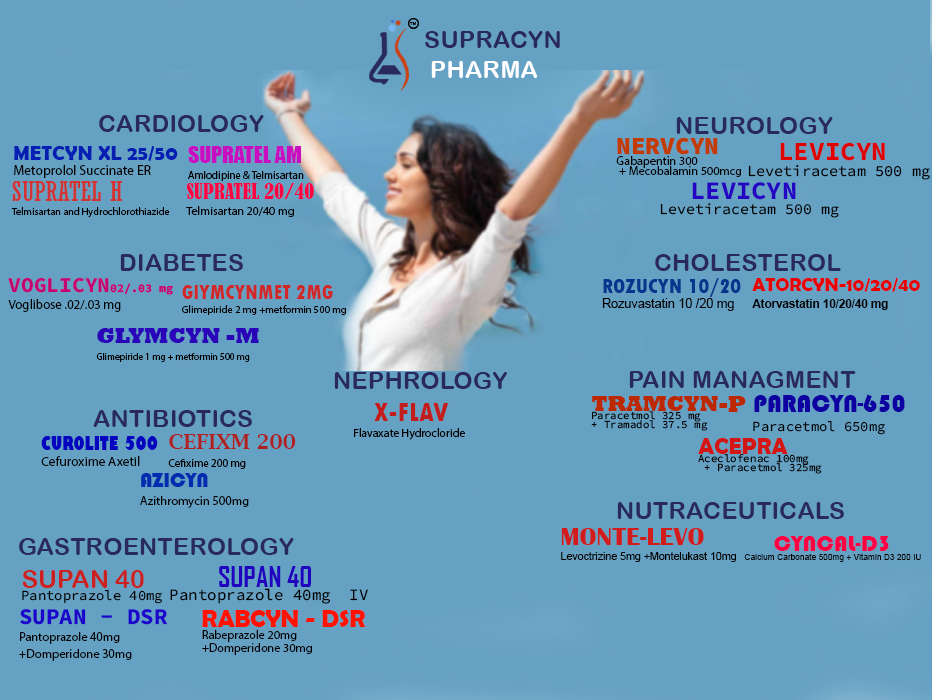
<style>
.page{position:relative;width:932px;height:700px;background:#65a1c3}
.page>*{position:absolute;margin:0}
.t1{font:4.4px "ArialRoundedMTBold";color:#000000;text-transform:uppercase}
.t2{font:24.5px "ArialRoundedMTBold";color:#29295f;text-transform:uppercase}
.t3{font:12.2px/10.5px "MyriadPro-Regular";color:#000000}
.t4{font:24.5px/14.8px "SourceCodeRoman-Black";color:#c23b00}
.t5{font:13.6px/15.2px "MyriadPro-Regular";color:#000000}
.t6{font:20.5px/15.2px "BerlinSansFBDemi-Bold";color:#061eb1}
.t7{font:10.8px/16.1px "MyriadPro-Regular";color:#000000}
.t8{font:21.8px/16.1px "Impact";color:#c90ec2}
.t9{font:15.3px/15.7px "SourceCodeVariable-Roman";color:#000000}
.t10{font:26px/15.7px "SourceCodeRoman-Bold";color:#e00000}
.t11{font:10.3px/13.8px "MyriadPro-Regular";color:#000000}
.t12{font:26.9px/13.8px "Rockwell-Condensed";color:#d23434}
.t13{font:11.9px/15.8px "MyriadPro-Regular";color:#000000}
.t14{font:20.3px/15.8px "BernardMT-Condensed";color:#ff0042}
.t15{font:15px/15.4px "SourceCodeVariable-Roman";color:#000000}
.t16{font:25.4px/15.4px "SourceCodeRoman-Bold";color:#2605c2}
.t17{font:12.9px/16.7px "MyriadPro-Regular";color:#000000}
.t18{font:21.2px/15.7px "SourceCodeRoman-Bold";color:#c70171}
.t19{font:21.2px/11.7px "SourceCodeRoman-Bold";color:#c70171}
.t20{font:11.7px/16.7px "SourceCodeRoman-Bold";color:#c70171}
.t21{font:12.6px/15.3px "ArialMT";color:#000000}
.t22{font:21.9px/15.3px "TwCenMT-CondensedExtraBold";color:#04368e}
.t23{font:11.5px/16.7px "Arial-BoldMT";color:#000000}
.t24{font:18.8px/16.7px "BerlinSansFBDemi-Bold";color:#ea0000}
.t25{font:10.4px/13.9px "MyriadPro-Regular";color:#000000}
.t26{font:20.9px/13.9px "TwCenMT-CondensedExtraBold";color:#d02828}
.t27{font:9.6px/16.1px "MyriadPro-Regular";color:#000000}
.t28{font:21.8px/16.1px "Rockwell-ExtraBold";color:#2a04b8}
.t29{font:10.8px/8.5px "SourceCodeVariable-Roman";color:#000000}
.t30{font:21.7px/15.1px "Rockwell-ExtraBold";color:#bc2800}
.t31{font:13.8px/18.5px "SourceCodeVariable-Roman";color:#000000}
.t32{font:25px/18.5px "Bauhaus93";color:#0f00a1}
.t33{font:11.7px/15.7px "MyriadPro-Regular";color:#000000}
.t34{font:28.4px/15.7px "TwCenMT-CondensedExtraBold";color:#c21c1c}
.t35{font:13.4px/16.1px "MyriadPro-Regular";color:#000000}
.t36{font:19px/16.1px "GillSans-UltraBoldCondensed";color:#0505bf}
.t37{font:11.1px/18px "MyriadPro-Regular";color:#000000}
.t38{font:21.1px/18px "LucidaBright-Demi";color:#af2020}
.t39{font:23.1px/15.4px "BerlinSansFBDemi-Bold";color:#d31515}
.t40{font:12.5px/18.5px "MyriadPro-Regular";color:#000000}
.t41{font:20.9px/18.3px "Bauhaus93";color:#002daf}
.t42{font:10.6px/15.8px "ArialMT";color:#000000}
.t43{font:26.1px/15.8px "BritannicBold";color:#d21c1c}
.t44{font:8.4px/9.7px "ArialMT";color:#000000}
.t45{font:23.3px/9.7px "Bauhaus93";color:#c3641d}
.t46{font:23.3px/9.7px "Bauhaus93";color:#ff0042}
.t47{font:15.8px/12.9px "SourceCodeVariable-Roman";color:#000000}
.t48{font:27.4px/19.2px "AgencyFB-Reg";color:#75cceb}
.t49{font:27.4px/19.2px "AgencyFB-Bold";color:#2102be}
.t50{font:13.9px/12.7px "SourceCodeVariable-Roman";color:#000000}
.t51{font:25.1px/12.7px "ArialRoundedMTBold";color:#cb2121}
.t52{font:12.4px/16.7px "MyriadPro-Regular";color:#000000}
.t53{font:22.5px/16.7px "SourceCodeRoman-Bold";color:#1d06cb}
.t54{font:12.2px/12.4px "MyriadPro-Regular";color:#000000}
.t55{font:24.6px/12.4px "BerlinSansFBDemi-Bold";color:#ff1200}
</style>
<div class="page">
<p class="t1" style="left:409px;top:22px;width:7px;height:3px">TM</p>
<p class="t2" style="left:99px;top:115px;width:165px;height:17px">cardiology</p>
<p class="t2" style="left:676px;top:117px;width:157px;height:17px">neurology</p>
<p class="t3" style="left:616px;top:137px;width:125px;height:40px"><span class="t4">NERVCYN<br></span>Gabapentin 300<br> + Mecobalamin 500mcg</p>
<p class="t5" style="left:14px;top:146px;width:164px;height:32px"><span class="t6">METCYN XL 25/50<br></span>Metoprolol Succinate ER</p>
<p class="t7" style="left:188px;top:146px;width:116px;height:35px"><span class="t8">SUPRATEL AM<br></span>Amlodipine &amp; Telmisartan</p>
<p class="t9" style="left:748px;top:142px;width:182px;height:38px"><span class="t10">  LEVICYN<br></span>Levetiracetam 500 mg</p>
<p class="t11" style="left:11px;top:181px;width:159px;height:37px"><span class="t12">SUPRATEL H<br></span>Telmisartan and Hydrochlorothiazide</p>
<p class="t13" style="left:186px;top:183px;width:128px;height:34px"><span class="t14">SUPRATEL 20/40<br></span>Telmisartan 20/40 mg</p>
<p class="t15" style="left:660px;top:182px;width:179px;height:36px"><span class="t16">  LEVICYN<br></span>Levetiracetam 500 mg</p>
<p class="t2" style="left:120px;top:254px;width:123px;height:17px">diabetes</p>
<p class="t2" style="left:655px;top:254px;width:186px;height:17px">cholesterol</p>
<p class="t17" style="left:8px;top:278px;width:165px;height:34px"><span class="t18">VOGLICY</span><span class="t19">N</span><span class="t20">02/.03 mg<br></span>Voglibose .02/.03 mg</p>
<p class="t21" style="left:602px;top:278px;width:139px;height:33px"><span class="t22">ROZUCYN 10/20<br></span>Rozuvastatin 10 /20 mg</p>
<p class="t23" style="left:752px;top:278px;width:168px;height:32px"><span class="t24">ATORCYN-10/20/40<br></span>Atorvastatin 10/20/40 mg</p>
<p class="t25" style="left:182px;top:285px;width:164px;height:30px"><span class="t26">GlYMCYNMET 2MG<br></span>Glimepiride 2 mg +metformin 500 mg</p>
<p class="t27" style="left:96px;top:328px;width:163px;height:34px"><span class="t28">GLYMCYN -M<br></span>Glimepiride 1 mg + metformin 500 mg</p>
<p class="t2" style="left:334px;top:372px;width:173px;height:17px">Nephrology</p>
<p class="t2" style="left:629px;top:371px;width:227px;height:17px">pain managment</p>
<p class="t29" style="left:591px;top:396px;width:155px;height:35px"><span class="t30">TRAMCYN-P<br></span>Paracetmol 325 mg <br>+ Tramadol 37.5 mg</p>
<p class="t31" style="left:753px;top:394px;width:152px;height:41px"><span class="t32">PARACYN-650<br></span>Paracetmol 650mg</p>
<p class="t2" style="left:93px;top:410px;width:159px;height:17px">antibiotics</p>
<p class="t33" style="left:354px;top:403px;width:111px;height:37px"><span class="t34">   X-FLAV<br></span>Flavaxate Hydrocloride</p>
<p class="t35" style="left:41px;top:436px;width:117px;height:30px"><span class="t36">CUROLITE 500<br></span>Cefuroxime Axetil</p>
<p class="t37" style="left:168px;top:434px;width:128px;height:35px"><span class="t38">CEFIXM 200<br></span>Cefixime 200 mg</p>
<p class="t29" style="left:698px;top:438px;width:124px;height:36px"><span class="t39">ACEPRA<br></span>Aceclofenac 100mg<br> + Paracetmol 325mg</p>
<p class="t40" style="left:140px;top:473px;width:109px;height:35px"><span class="t41">AZICYN <br></span>Azithromycin 500mg</p>
<p class="t2" style="left:617px;top:502px;width:227px;height:17px">nutraceuticals</p>
<p class="t42" style="left:561px;top:528px;width:175px;height:34px"><span class="t43">MONTE-LEVO<br></span>Levoctrizine 5mg +Montelukast 10mg</p>
<p class="t2" style="left:19px;top:538px;width:275px;height:17px">gastroenterology</p>
<p class="t44" style="left:744px;top:536px;width:177px;height:26px"><span class="t45">     </span><span class="t46">CYNCAL-D3<br></span>Calcium Carbonate 500mg + Vitamin D3 200 IU</p>
<p class="t47" style="left:170px;top:566px;width:198px;height:38px"><span class="t48">         </span><span class="t49">SUPAN 40 <br></span>Pantoprazole 40mg  IV</p>
<p class="t50" style="left:22px;top:570px;width:140px;height:34px"><span class="t51">SUPAN 40 <br></span>Pantoprazole 40mg</p>
<p class="t52" style="left:19px;top:609px;width:148px;height:52px"><span class="t53">SUPAN - DSR<br></span>Pantoprazole 40mg <br>+Domperidone 30mg</p>
<p class="t54" style="left:202px;top:610px;width:163px;height:45px"><span class="t55">RABCYN - DSR<br></span>Rabeprazole 20mg <br>+Domperidone 30mg</p>
</div>
